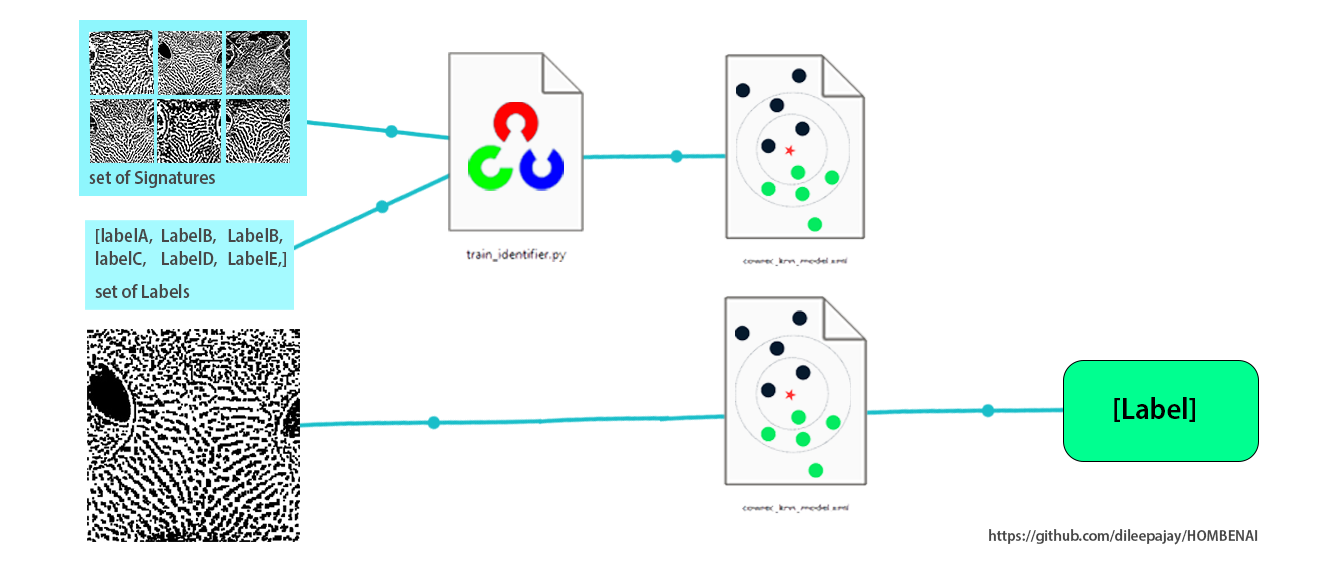
<style>
.page{position:relative;width:1338px;height:569px;background:#ffffff}
.page>*{position:absolute;margin:0}
.t1{font:19.1px "MyriadPro-SemiboldSemiCn";color:#484848}
.t2{font:19px "MyriadPro-SemiboldSemiCn";color:#484848}
.t3{font:19.3px "MyriadPro-SemiboldSemiCn";color:#484848}
.t4{font:31px "MyriadPro-SemiboldSemiCn";color:#000000}
.t5{font:16px "MyriadPro-SemiboldSemiCn";color:#484848}
</style>
<div class="page">
<p class="t1" style="left:89px;top:170px;width:126px;height:18px">set of Signatures</p>
<p class="t2" style="left:96px;top:228px;width:190px;height:39px">[labelA, LabelB, LabelB,<br>labelC, LabelD, LabelE,]</p>
<p class="t3" style="left:95px;top:284px;width:95px;height:14px">set of Labels</p>
<p class="t4" style="left:1114px;top:397px;width:81px;height:25px">[Label]</p>
<p class="t5" style="left:989px;top:529px;width:269px;height:16px">https://github.com/dileepajay/HOMBENAI</p>
</div>
